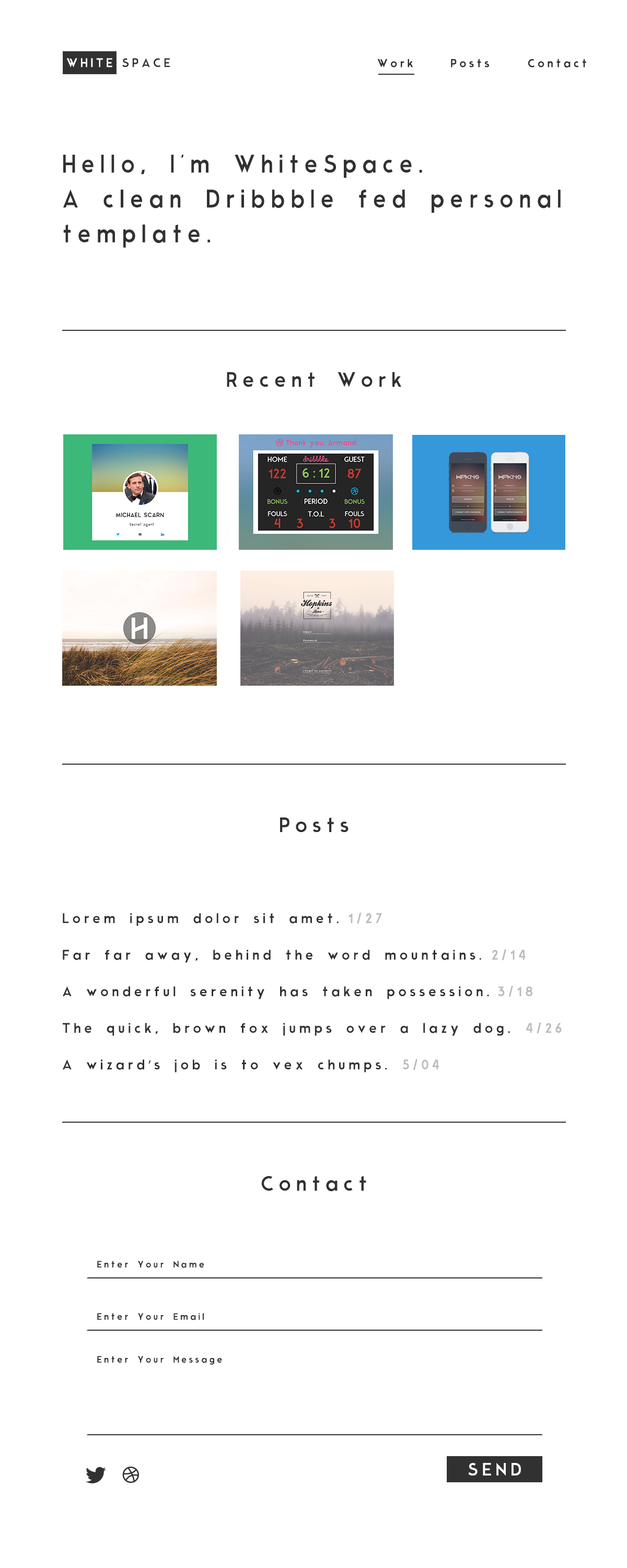
<style>
.page{position:relative;width:627px;height:1568px;background:#ffffff}
.page>*{position:absolute;margin:0}
.t1{font:11.7px "ModernSans";letter-spacing:0.24em;color:#ffffff}
.t2{font:11.7px "ModernSans";letter-spacing:0.24em;color:#313131}
.t3{font:24px/34.9px "ModernSans";letter-spacing:0.24em;color:#313131;scale:0.92 1}
.t4{font:19.6px "ModernSans";letter-spacing:0.24em;color:#313131}
.t5{font:13.1px "ModernSans";letter-spacing:0.24em;color:#313131}
.t6{font:13.1px "ModernSans";letter-spacing:0.24em;color:#bcbcbc}
.t7{font:13.1px "MyriadPro-Regular";letter-spacing:0.24em;color:#313131}
.t8{font:8.7px "ModernSans";letter-spacing:0.24em;color:#313131}
.t9{font:16.8px "ModernSans";letter-spacing:0.24em;color:#ffffff}
</style>
<div class="page">
<p class="t1" style="left:67px;top:58px;width:45px;height:9px">WHITE</p>
<p class="t2" style="left:122px;top:58px;width:48px;height:9px">SPACE</p>
<p class="t3" style="left:63px;top:155px;width:498px;height:93px">Hello, I'm WhiteSpace. <br>A clean Dribbble fed personal<br>template.</p>
<p class="t4" style="left:227px;top:372px;width:174px;height:15px">Recent Work</p>
<p class="t4" style="left:280px;top:817px;width:69px;height:15px">Posts</p>
<p class="t5" style="left:63px;top:913px;width:276px;height:13px">Lorem ipsum dolor sit amet.</p>
<p class="t6" style="left:349px;top:913px;width:33px;height:11px">1/27</p>
<p class="t5" style="left:63px;top:950px;width:418px;height:13px">Far far away, behind the word mountains.</p>
<p class="t6" style="left:492px;top:949px;width:34px;height:11px">2/14</p>
<p class="t5" style="left:63px;top:986px;width:426px;height:13px">A wonderful serenity has taken possession.</p>
<p class="t6" style="left:498px;top:986px;width:35px;height:11px">3/18</p>
<p class="t5" style="left:63px;top:1023px;width:447px;height:13px">The quick, brown fox jumps over a lazy dog.</p>
<p class="t6" style="left:526px;top:1022px;width:36px;height:11px">4/26</p>
<p class="t5" style="left:63px;top:1059px;width:324px;height:14px">A wizard<span class="t7">’</span>s job is to vex chumps.</p>
<p class="t6" style="left:403px;top:1059px;width:36px;height:11px">5/04</p>
<p class="t4" style="left:261px;top:1176px;width:105px;height:16px">Contact</p>
<p class="t8" style="left:97px;top:1261px;width:107px;height:7px">Enter Your Name</p>
<p class="t8" style="left:97px;top:1313px;width:107px;height:7px">Enter Your Email</p>
<p class="t8" style="left:97px;top:1356px;width:125px;height:9px">Enter Your Message</p>
<p class="t9" style="left:468px;top:1463px;width:53px;height:12px">SEND</p>
</div>
